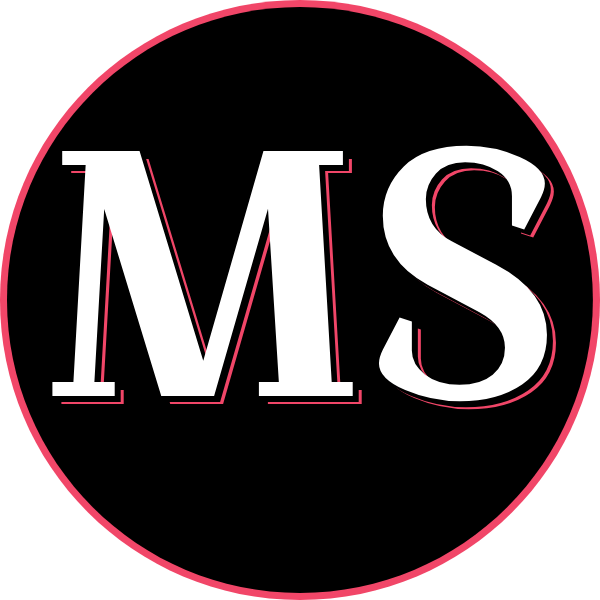
<style>
.page{position:relative;width:600px;height:600px;background:#000000}
.page>*{position:absolute;margin:0}
.t1{font:350px "CroissantOne-Regular";color:#ffffff}
</style>
<div class="page">
<p class="t1" style="left:52px;top:145px;width:495px;height:257px">MS</p>
<p class="t1" style="left:58px;top:151px;width:495px;height:257px">MS</p>
<p class="t1" style="left:61px;top:153px;width:495px;height:257px">MS</p>
</div>
